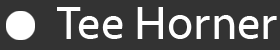
<style>
.page{position:relative;width:280px;height:50px;background:#333333}
.page>*{position:absolute;margin:0}
.t1{font:48px "Seravek";color:#ffffff}
</style>
<div class="page">
<p class="t1" style="left:57px;top:7px;width:220px;height:32px">Tee Horner</p>
</div>
